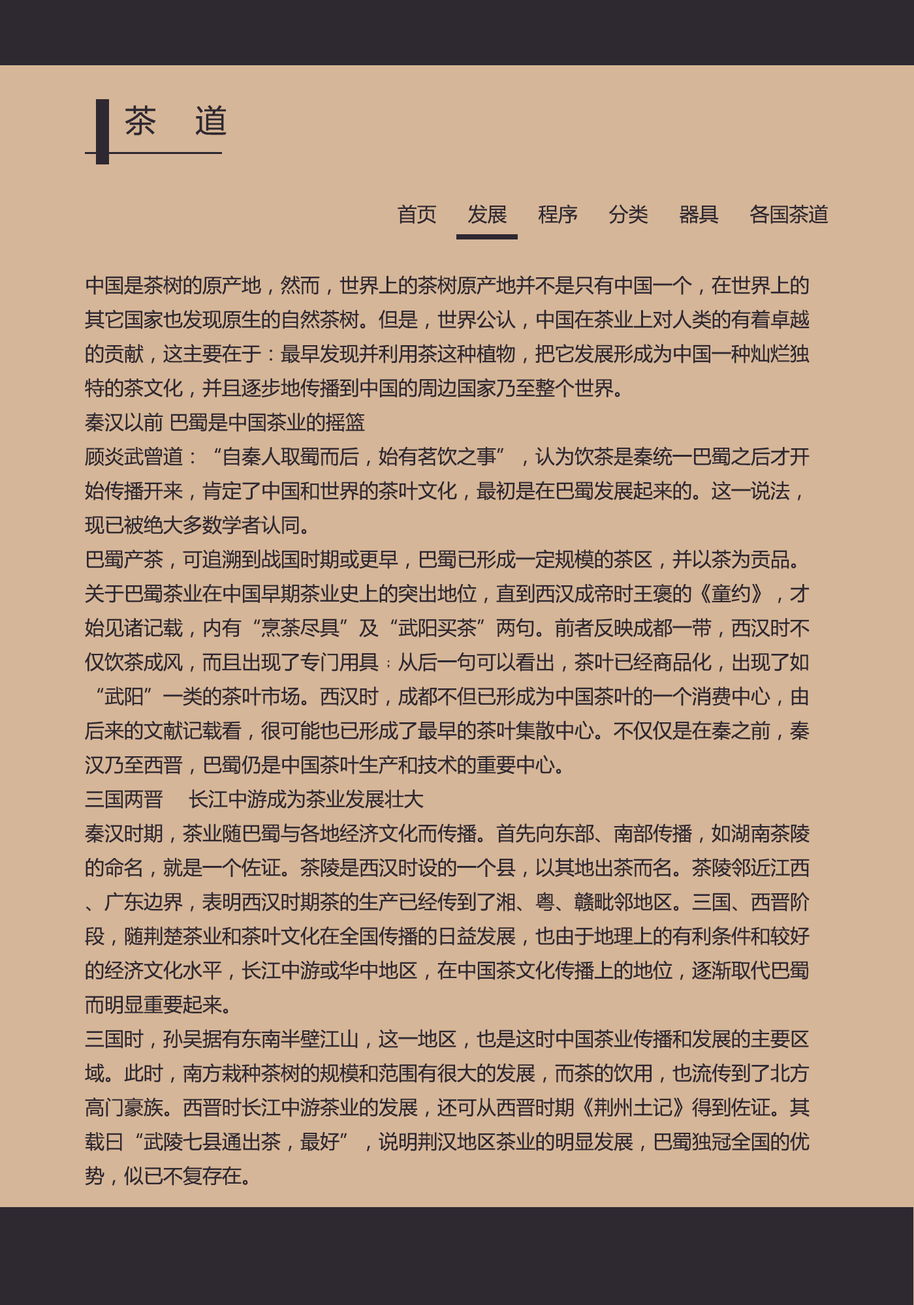
<style>
.page{position:relative;width:914px;height:1305px;background:#d6b698}
.page>*{position:absolute;margin:0}
.t1{font:31.3px "MicrosoftYaHei";color:#2e2831}
.t2{font:19.6px "MicrosoftYaHei";color:#2e2831}
</style>
<div class="page">
<p class="t1" style="left:125px;top:105px;width:101px;height:31px">茶  道</p>
<p class="t2" style="left:397px;top:204px;width:431px;height:20px">首页  发展   程序  分类   器具   各国茶道</p>
<p class="t2" style="left:85px;top:275px;width:724px;height:911px">中国是茶树的原产地，然而，世界上的茶树原产地并不是只有中国一个，在世界上的其它国家也发现原生的自然茶树。但是，世界公认，中国在茶业上对人类的有着卓越的贡献，这主要在于：最早发现并利用茶这种植物，把它发展形成为中国一种灿烂独特的茶文化，并且逐步地传播到中国的周边国家乃至整个世界。<br>秦汉以前 巴蜀是中国茶业的摇篮<br>顾炎武曾道：“自秦人取蜀而后，始有茗饮之事”，认为饮茶是秦统一巴蜀之后才开始传播开来，肯定了中国和世界的茶叶文化，最初是在巴蜀发展起来的。这一说法，现已被绝大多数学者认同。<br>巴蜀产茶，可追溯到战国时期或更早，巴蜀已形成一定规模的茶区，并以茶为贡品。<br>关于巴蜀茶业在中国早期茶业史上的突出地位，直到西汉成帝时王褒的《童约》，才始见诸记载，内有“烹荼尽具”及“武阳买茶”两句。前者反映成都一带，西汉时不仅饮茶成风，而且出现了专门用具﹔从后一句可以看出，茶叶已经商品化，出现了如“武阳”一类的茶叶市场。西汉时，成都不但已形成为中国茶叶的一个消费中心，由后来的文献记载看，很可能也已形成了最早的茶叶集散中心。不仅仅是在秦之前，秦汉乃至西晋，巴蜀仍是中国茶叶生产和技术的重要中心。<br>三国两晋 　长江中游成为茶业发展壮大<br>秦汉时期，茶业随巴蜀与各地经济文化而传播。首先向东部、南部传播，如湖南茶陵的命名，就是一个佐证。茶陵是西汉时设的一个县，以其地出茶而名。茶陵邻近江西、广东边界，表明西汉时期茶的生产已经传到了湘、粤、赣毗邻地区。三国、西晋阶段，随荆楚茶业和茶叶文化在全国传播的日益发展，也由于地理上的有利条件和较好的经济文化水平，长江中游或华中地区，在中国茶文化传播上的地位，逐渐取代巴蜀而明显重要起来。<br>三国时，孙吴据有东南半壁江山，这一地区，也是这时中国茶业传播和发展的主要区域。此时，南方栽种茶树的规模和范围有很大的发展，而茶的饮用，也流传到了北方高门豪族。西晋时长江中游茶业的发展，还可从西晋时期《荆州土记》得到佐证。其载曰“武陵七县通出茶，最好”，说明荆汉地区茶业的明显发展，巴蜀独冠全国的优势，似已不复存在。<br>南渡西晋之后，北方豪门过江侨居，建康（南京）成为中国南方的政治中心。这一时期，由于上层社会崇茶之风盛行，使得南方尤其是江东饮茶和茶叶文化有了较大的发展，也进一步促进了中国茶业向东南推进。这一时期，中国东南植茶，由浙西进而扩展到了现今温州、宁波沿海一线。不仅如此，如《桐君录》所载，「西阳、武昌、晋陵皆出好茗」，晋陵即常州，其茶出宜兴。表明东晋和南朝时，长江下游宜兴一带的茶业，也著名起来。三国两晋之后，茶业重心东移的趋势，更加明显化了。<br>唐代 　长江中下游地区成为茶叶生产和技术中心<br>六朝以前，茶在南方的生产和饮用，已有一定发展，但北方饮者还不多。及至唐朝中后期，如《膳夫经手录》所载「今关西、山东，闾阎村落皆吃之，累日不食犹得，不得一日无茶」。中原和西北少数民族地区，都嗜茶成俗，于是南方茶的生产，随之空前蓬勃发展了起来。尤其是与北方交通便利的江南、淮南茶区，茶的生产更是得到了格外发展。唐代中叶后，长江中下游茶区，不仅茶产量大幅度提高，就是制茶技术，也达到了当时的最高水平。舒州集贤沐芽、湖州紫笋和常州阳羡茶成为了贡茶就是集中体现。茶叶生产和技术的中心，已经转移到了长江中游和下游，江南茶叶生产，集一时之盛。当时史料记载，安徽祁门周围，千里之内，各地种茶，山无遗土，业于茶者十之七八。同时由于贡茶设置在江南，大大促进了江南制茶技术的提高，也带动了全国各茶区的生产和发展。由《茶经》和唐代其它文献记载来看，这时期茶叶产区已遍及今之四川、陕西、湖北、云南、广西、贵州、湖南、广东、福建、江西、浙江、江苏、安徽、河南等十四个省区，几乎达到了与中国近代茶区约略相当的局面。<br>宋代 　茶业重心由东向南移<br>从五代和宋朝初年起，全国气候由暖转寒，致使中国南方南部的茶业，较北部更加迅速发展了起来，并逐渐取代长江中下游茶区，成为茶业的重心。主要表现在贡茶从顾渚紫笋改为福建建安茶，唐时还不曾形成气候的闵南和岭南一带的茶业，明显地活跃和发展起来。<br>宋朝茶业重心南移的主要原因是气候的变化，长江一带早春气温较低，茶树发芽推迟，不能保证茶叶在清明前贡到京都。福建气候较暖，如欧阳修所说「建安三千里，京师三月尝新茶」。作为贡茶，建安茶的采制，必然精益求精，名声也愈来愈大，成为中国团茶、饼茶制作的主要技术中心，带动了闵南、岭南茶区的崛起和发展。由此可见，到了宋代，茶已传播到全国各地。宋朝的茶区，基本上已与现代茶区范围相符，明清以后，茶区基本稳定，茶业的发展主要是体现在茶叶制法和各茶类兴衰演变。</p>
</div>
